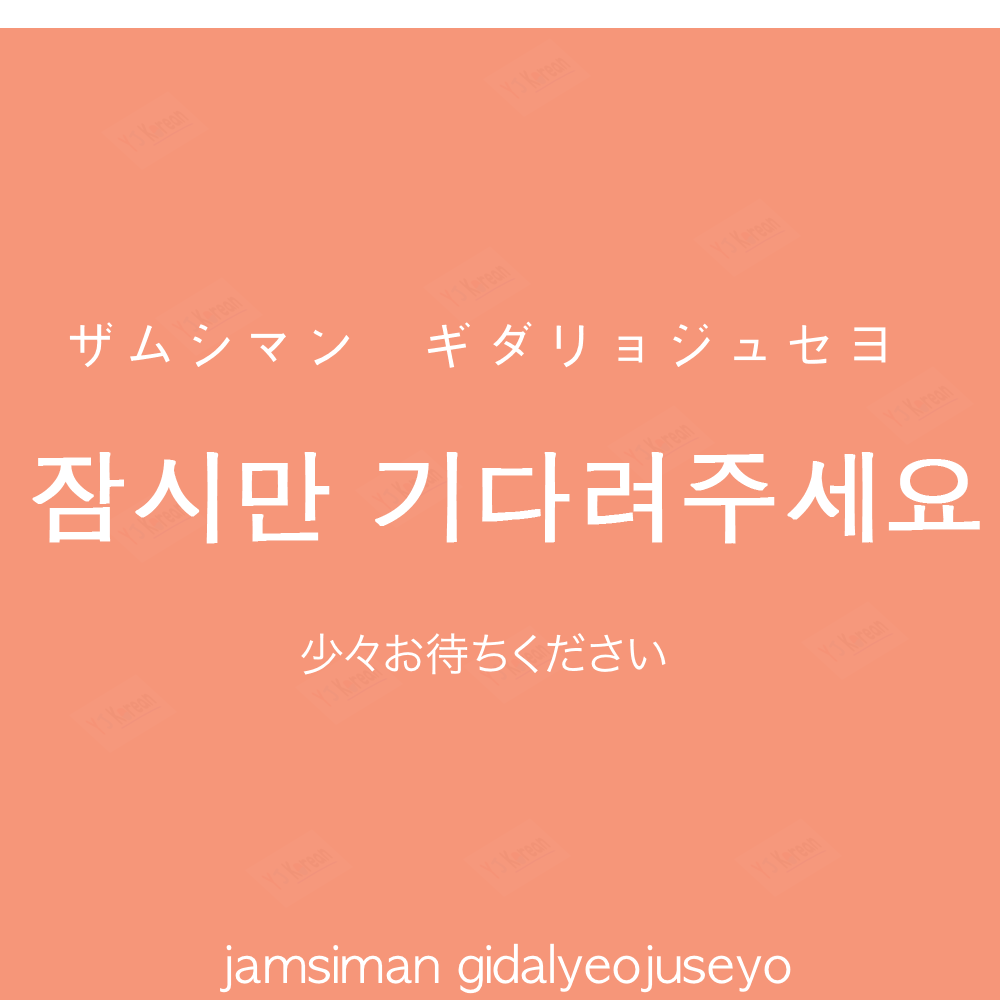
<style>
.page{position:relative;width:1000px;height:1000px;background:#f69679}
.page>*{position:absolute;margin:0}
.t1{font:60px "AppleGothic";color:#ffffff}
.t2{font:100px "AppleGothic";color:#ffffff;font-weight:bold}
.t3{font:45px "HiraKakuProN-W3";color:#ffffff}
.t4{font:50px "AppleGothic";color:#ffffff}
</style>
<div class="page">
<p class="t1" style="left:69px;top:321px;width:817px;height:47px">ザムシマン　ギダリョジュセヨ</p>
<p class="t2" style="left:32px;top:452px;width:948px;height:92px">잠시만 기다려주세요</p>
<p class="t3" style="left:301px;top:633px;width:365px;height:42px">少々お待ちください</p>
<p class="t4" style="left:220px;top:943px;width:571px;height:51px">jamsiman gidalyeojuseyo</p>
</div>
